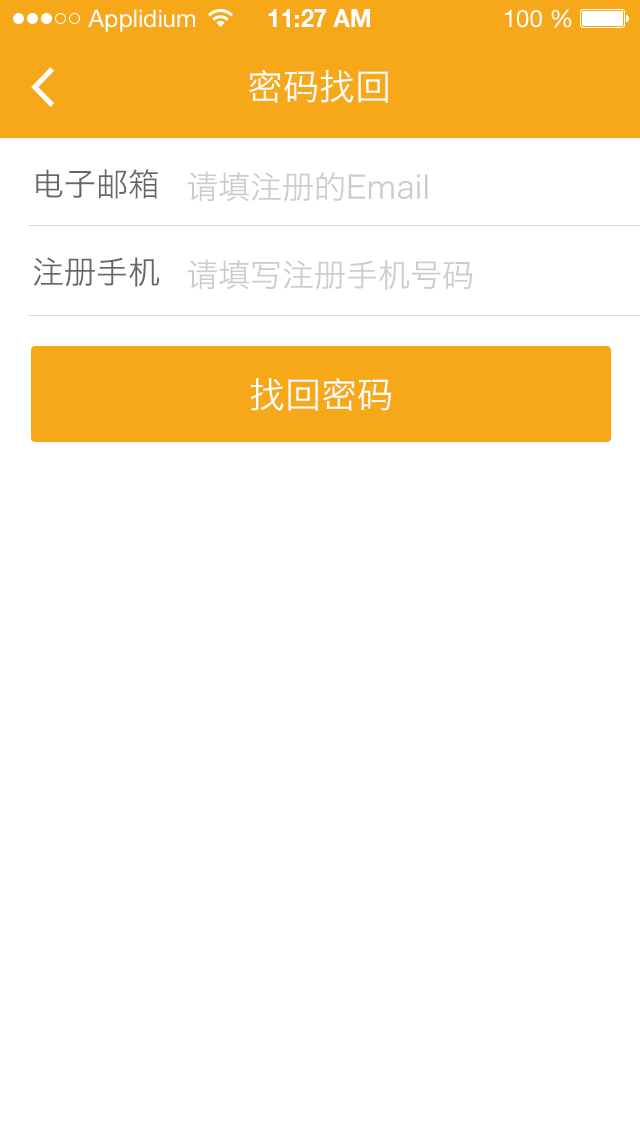
<style>
.page{position:relative;width:640px;height:1136px;background:#ffffff}
.page>*{position:absolute;margin:0}
.t1{font:24px "HelveticaNeueLTStd-Roman";color:#ffffff}
.t2{font:24px "HelveticaNeueLTStd-Bd";color:#ffffff}
.t3{font:36px "HiraginoSansGB-W3";color:#ffffff}
.t4{font:32px/88px "HiraginoSansGB-W3";color:#666666}
.t5{font:32px/88px "HiraginoSansGB-W3";color:#cccccc}
</style>
<div class="page">
<p class="t1" style="left:88px;top:9px;width:107px;height:23px">Applidium</p>
<p class="t2" style="left:268px;top:9px;width:102px;height:18px">11:27 AM</p>
<p class="t1" style="left:505px;top:9px;width:67px;height:19px">100 %</p>
<p class="t3" style="left:249px;top:69px;width:139px;height:34px">密码找回</p>
<p class="t4" style="left:33px;top:169px;width:126px;height:118px">电子邮箱<br>注册手机</p>
<p class="t5" style="left:187px;top:171px;width:286px;height:119px">请填注册的Email<br>请填写注册手机号码</p>
<p class="t3" style="left:250px;top:377px;width:141px;height:34px">找回密码</p>
</div>
